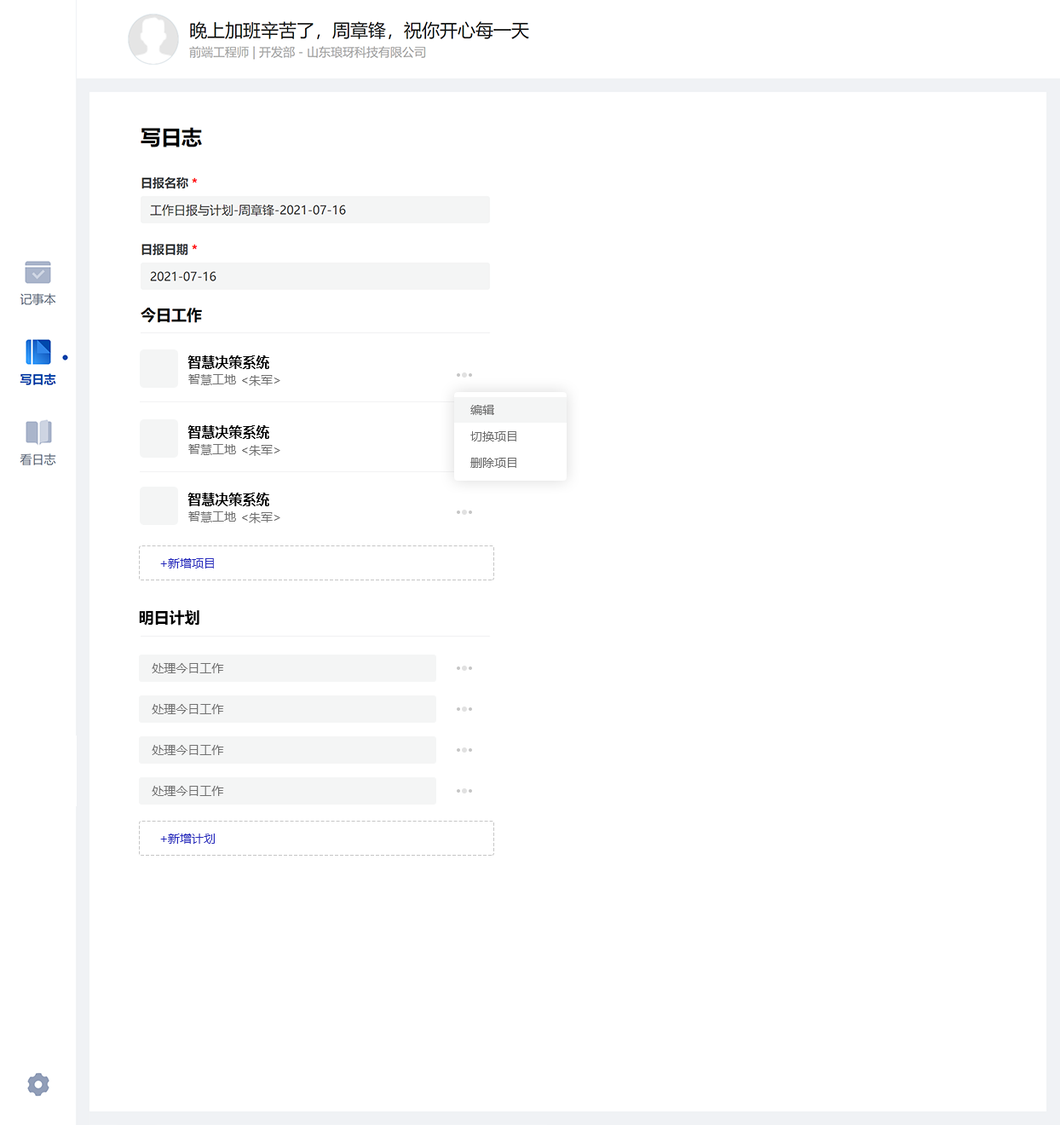
<style>
.page{position:relative;width:1060px;height:1125px;background:#ffffff}
.page>*{position:absolute;margin:0}
.t1{font:13.6px "MicrosoftYaHei-Bold";color:#000000}
.t2{font:11.9px "MicrosoftYaHei";color:#717171}
.t3{font:11.9px "MicrosoftYaHei";color:#6c6c6c}
.t4{font:11.9px "MicrosoftYaHei";color:#272bbe}
.t5{font:15.3px "MicrosoftYaHei-Bold";color:#000000}
</style>
<div class="page">
<p class="t1" style="left:187px;top:355px;width:82px;height:14px">智慧决策系统</p>
<p class="t2" style="left:188px;top:374px;width:48px;height:11px">智慧工地</p>
<p class="t2" style="left:242px;top:375px;width:38px;height:11px">&lt;朱军&gt;</p>
<p class="t3" style="left:470px;top:405px;width:24px;height:10px">编辑</p>
<p class="t1" style="left:187px;top:425px;width:82px;height:14px">智慧决策系统</p>
<p class="t3" style="left:470px;top:431px;width:46px;height:10px">切换项目</p>
<p class="t2" style="left:188px;top:444px;width:48px;height:11px">智慧工地</p>
<p class="t2" style="left:242px;top:445px;width:38px;height:11px">&lt;朱军&gt;</p>
<p class="t3" style="left:470px;top:458px;width:46px;height:10px">删除项目</p>
<p class="t1" style="left:187px;top:493px;width:82px;height:13px">智慧决策系统</p>
<p class="t2" style="left:188px;top:511px;width:48px;height:11px">智慧工地</p>
<p class="t2" style="left:242px;top:512px;width:38px;height:11px">&lt;朱军&gt;</p>
<p class="t4" style="left:160px;top:558px;width:54px;height:10px">+新增项目</p>
<p class="t5" style="left:139px;top:610px;width:60px;height:15px">明日计划</p>
<p class="t2" style="left:152px;top:663px;width:72px;height:10px">处理今日工作</p>
<p class="t2" style="left:152px;top:704px;width:72px;height:10px">处理今日工作</p>
<p class="t2" style="left:152px;top:745px;width:72px;height:10px">处理今日工作</p>
<p class="t2" style="left:152px;top:786px;width:72px;height:10px">处理今日工作</p>
<p class="t4" style="left:160px;top:833px;width:55px;height:11px">+新增计划</p>
</div>
